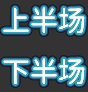
<style>
.page{position:relative;width:88px;height:92px;background:#333333}
.page>*{position:absolute;margin:0}
.t1{font:28px "Resource-Han-Rounded-CN-Regular";color:#ffffff}
</style>
<div class="page">
<p class="t1" style="left:3px;top:7px;width:82px;height:26px">上半场</p>
<p class="t1" style="left:3px;top:7px;width:82px;height:26px">上半场</p>
<p class="t1" style="left:3px;top:58px;width:82px;height:26px">下半场</p>
<p class="t1" style="left:3px;top:58px;width:82px;height:26px">下半场</p>
</div>
